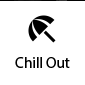
<style>
.page{position:relative;width:85px;height:85px;background:#ffffff}
.page>*{position:absolute;margin:0}
.t1{font:15px "MyriadPro-Regular";color:#000000}
</style>
<div class="page">
<p class="t1" style="left:15px;top:56px;width:55px;height:11px">Chill Out</p>
</div>
